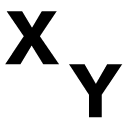
<style>
.page{position:relative;width:128px;height:128px;background:#ffffff}
.page>*{position:absolute;margin:0}
.t1{font:75px "AvenirNext-Bold";color:#000000}
</style>
<div class="page">
<p class="t1" style="left:5px;top:11px;width:54px;height:54px">X</p>
<p class="t1" style="left:69px;top:64px;width:54px;height:54px">Y</p>
</div>
